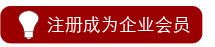
<style>
.page{position:relative;width:215px;height:47px;background:#9a0000}
.page>*{position:absolute;margin:0}
.t1{font:18px "STXihei";color:#ffffff}
</style>
<div class="page">
<p class="t1" style="left:47px;top:16px;width:143px;height:17px">注册成为企业会员</p>
</div>
